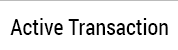
<style>
.page{position:relative;width:178px;height:50px;background:#ffffff}
.page>*{position:absolute;margin:0}
.t1{font:22px "RobotoCondensed-Regular";color:#000000}
</style>
<div class="page">
<p class="t1" style="left:10px;top:18px;width:158px;height:17px">Active Transaction</p>
</div>
